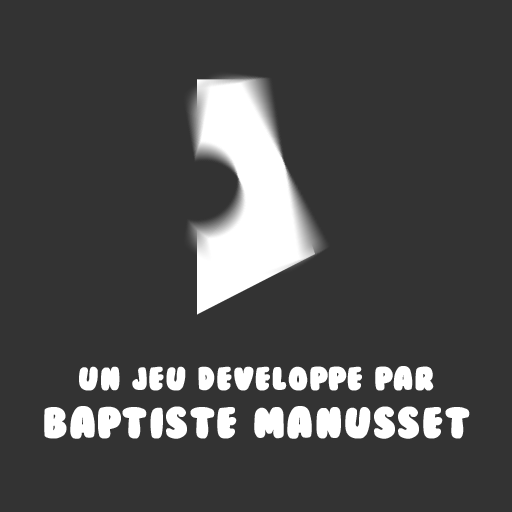
<style>
.page{position:relative;width:512px;height:512px;background:#333333}
.page>*{position:absolute;margin:0}
.t1{font:30px "BubbleGum";letter-spacing:0.04em;color:#ffffff;font-weight:bold}
.t2{font:40px "BubbleGum";letter-spacing:0.04em;color:#ffffff;font-weight:bold}
</style>
<div class="page">
<p class="t1" style="left:44px;top:366px;width:426px;height:73px;text-align:justify">Un jeu developpe par<br><span class="t2">Baptiste Manusset</span></p>
</div>
